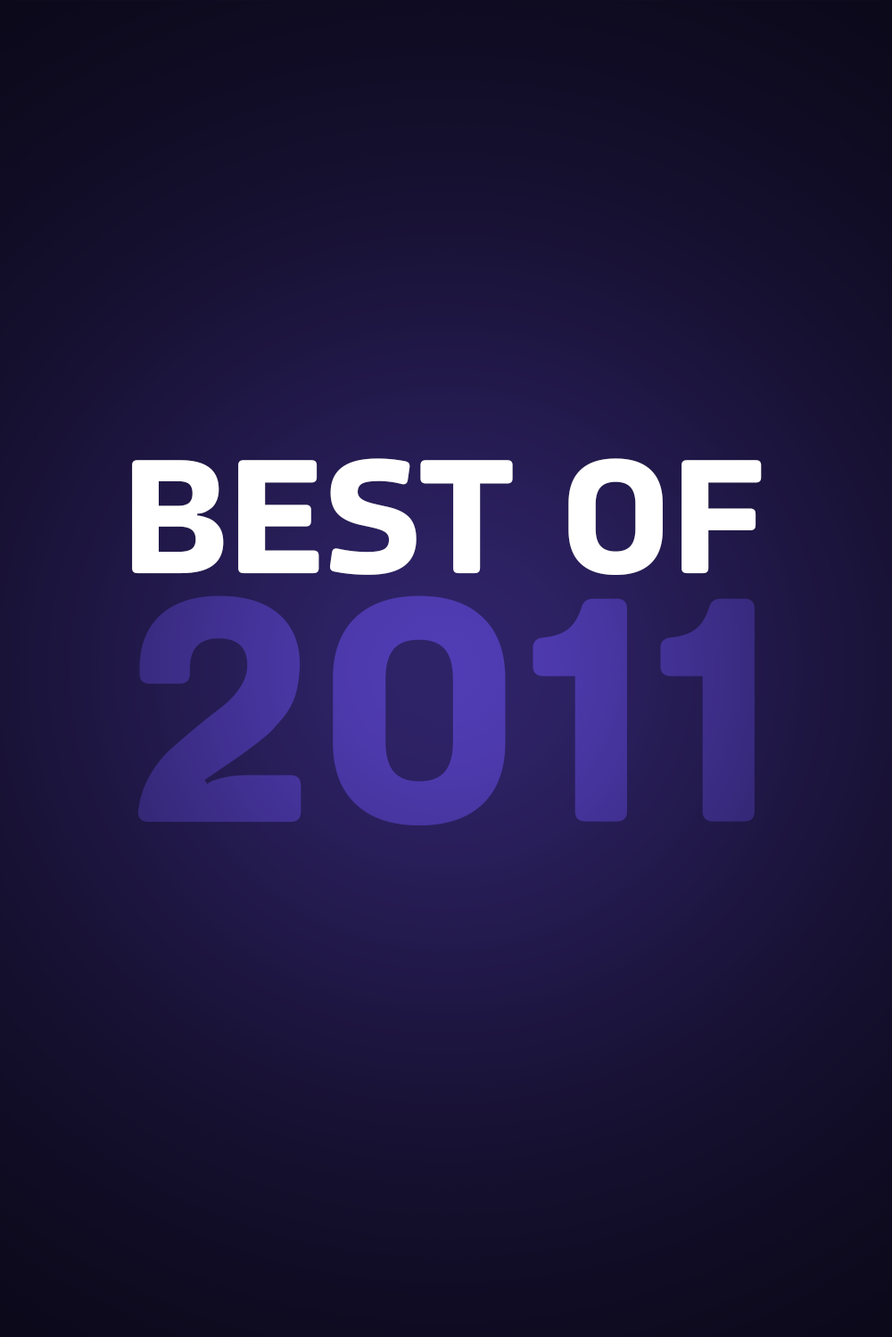
<style>
.page{position:relative;width:892px;height:1337px}
.page>*{position:absolute;margin:0}
.t1{font:161.8px "Amfibia-Bold";color:#ffffff;scale:1.03 1}
.t2{font:323.6px "Amfibia-Bold";scale:1.03 1}
</style>
<div class="page">
<p class="t1" style="left:132px;top:458px;width:629px;height:117px">BEST OF</p>
<p class="t2" style="left:137px;top:596px;width:617px;height:230px">2011</p>
</div>
